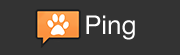
<style>
.page{position:relative;width:180px;height:55px;background:#333333}
.page>*{position:absolute;margin:0}
.t1{font:26px "HelveticaNeue";color:#ffffff}
</style>
<div class="page">
<p class="t1" style="left:86px;top:15px;width:49px;height:25px">Ping</p>
</div>
